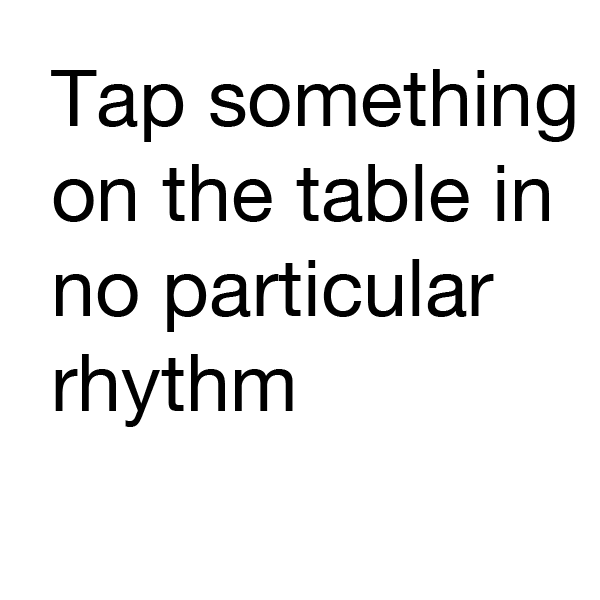
<style>
.page{position:relative;width:600px;height:600px;background:#ffffff}
.page>*{position:absolute;margin:0}
.t1{font:79.2px "HelveticaNeue";color:#000000}
</style>
<div class="page">
<p class="t1" style="left:51px;top:69px;width:524px;height:358px">Tap something<br>on the table in<br>no particular <br>rhythm</p>
</div>
